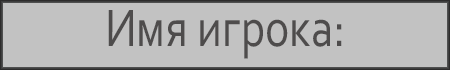
<style>
.page{position:relative;width:450px;height:70px;background:#c2c2c2}
.page>*{position:absolute;margin:0}
.t1{font:55.3px "Corbel";color:#4e4c4c;scale:0.82 1}
</style>
<div class="page">
<p class="t1" style="left:108px;top:10px;width:234px;height:49px">Имя игрока:</p>
</div>
